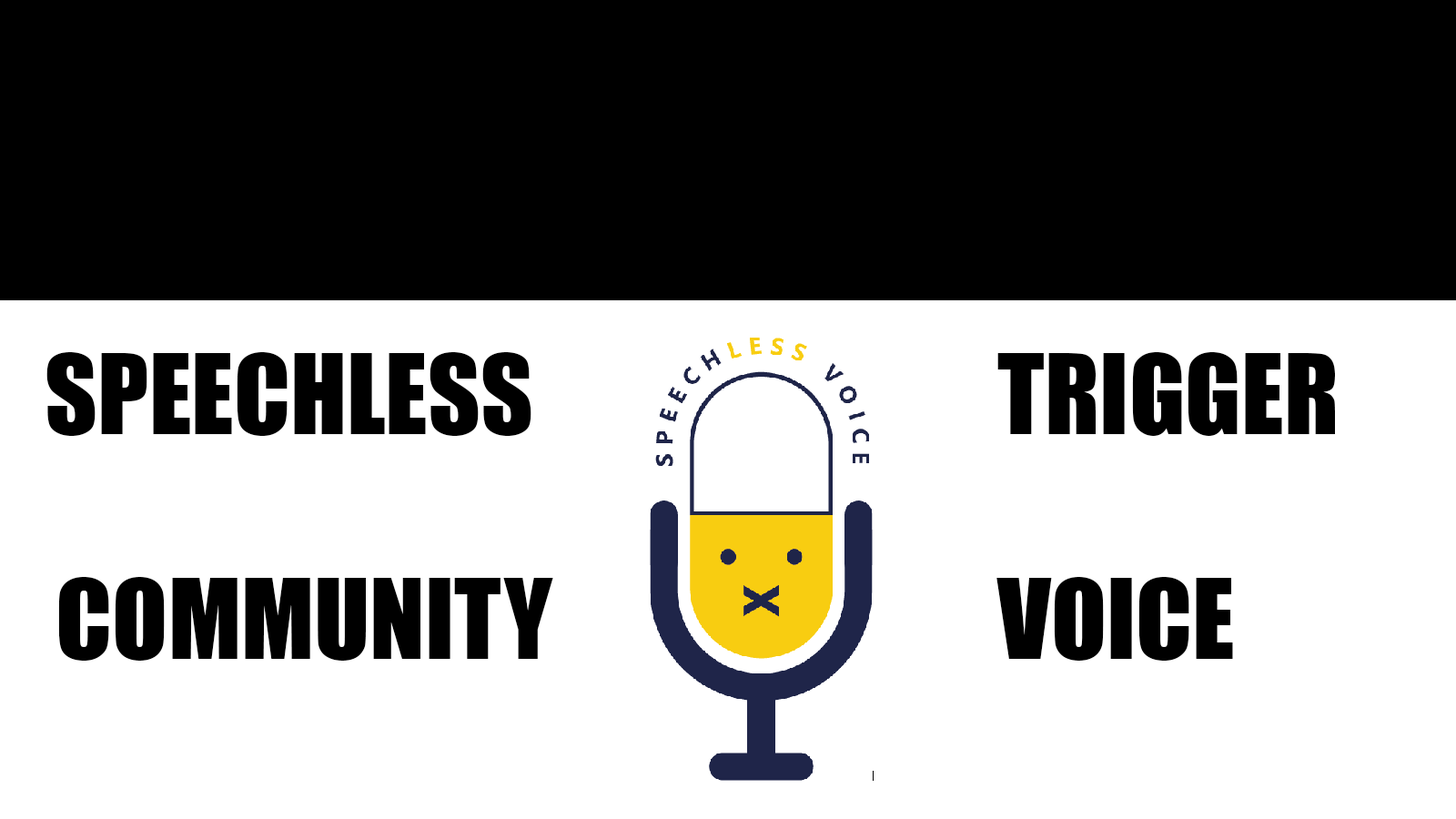
<style>
.page{position:relative;width:1456px;height:819px;background:#ffffff}
.page>*{position:absolute;margin:0}
.t1{font:101.9px "Impact";color:#000000}
</style>
<div class="page">
<p class="t1" style="left:46px;top:352px;width:485px;height:84px">SPEECHLESS</p>
<p class="t1" style="left:997px;top:352px;width:338px;height:84px">TRIGGER</p>
<p class="t1" style="left:58px;top:577px;width:495px;height:84px">COMMUNITY</p>
<p class="t1" style="left:996px;top:577px;width:237px;height:84px">VOICE</p>
</div>
